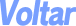
<style>
.page{position:relative;width:76px;height:26px;background:#789ffe}
.page>*{position:absolute;margin:0}
.t1{font:32px "RodinPro-EB";letter-spacing:-0.054em;color:#789ffe;font-style:italic;scale:0.84 1}
</style>
<div class="page">
<p class="t1" style="left:0px;top:0px;width:76px;height:26px">Voltar</p>
</div>
